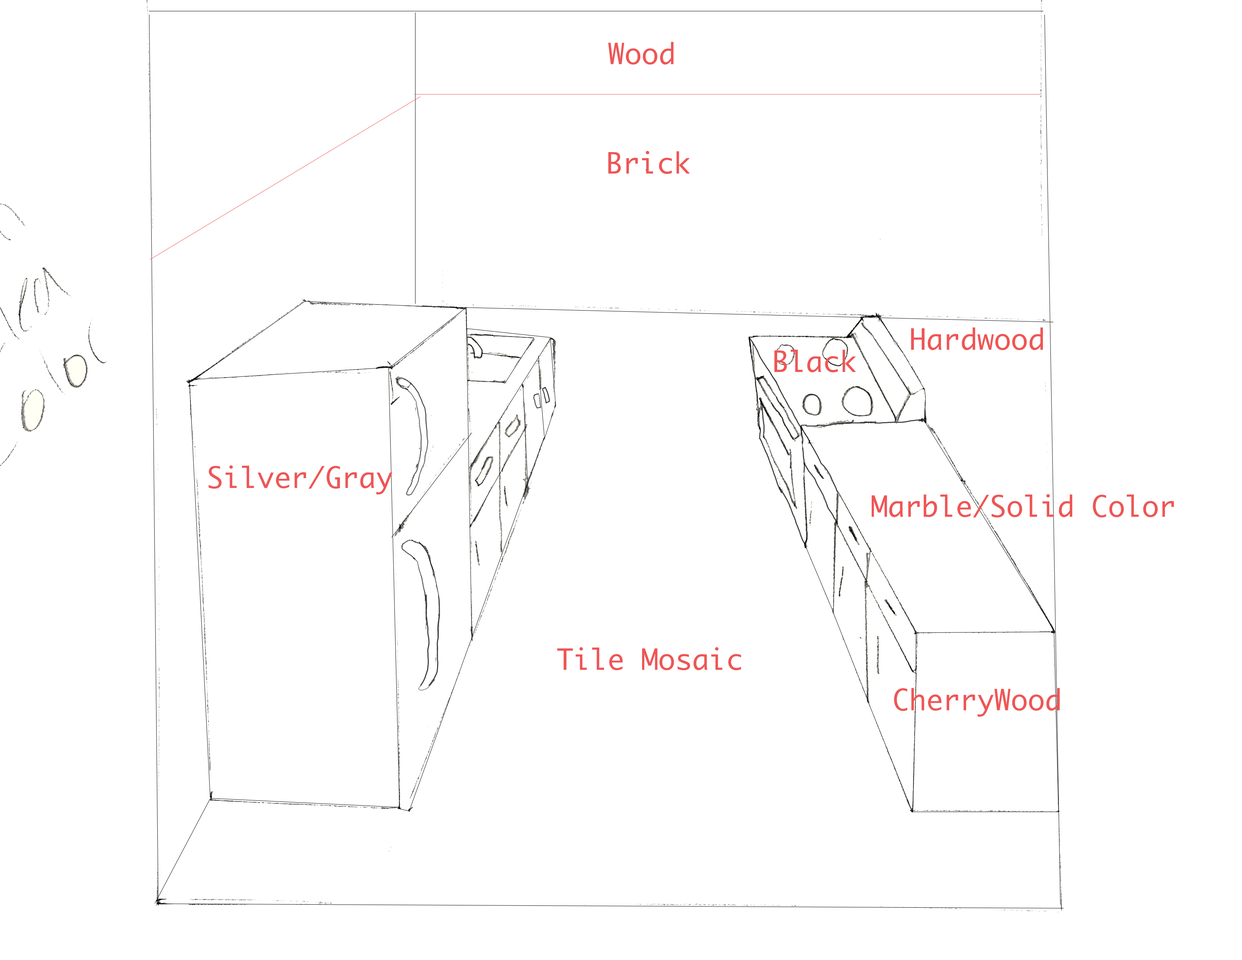
<style>
.page{position:relative;width:1242px;height:960px;background:#ffffff}
.page>*{position:absolute;margin:0}
.t1{font:28.2px "Monaco";color:#ef5555}
</style>
<div class="page">
<p class="t1" style="left:608px;top:42px;width:66px;height:23px">Wood</p>
<p class="t1" style="left:608px;top:151px;width:82px;height:23px">Brick</p>
<p class="t1" style="left:911px;top:327px;width:132px;height:23px">Hardwood</p>
<p class="t1" style="left:774px;top:349px;width:82px;height:23px">Black</p>
<p class="t1" style="left:209px;top:465px;width:184px;height:30px">Silver/Gray</p>
<p class="t1" style="left:872px;top:494px;width:302px;height:24px">Marble/Solid Color</p>
<p class="t1" style="left:557px;top:647px;width:184px;height:23px">Tile Mosaic</p>
<p class="t1" style="left:894px;top:688px;width:166px;height:29px">CherryWood</p>
</div>
